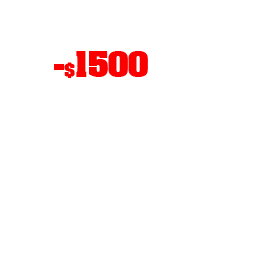
<style>
.page{position:relative;width:256px;height:256px;background:#ffffff}
.page>*{position:absolute;margin:0}
.t1{font:30px "AardvarkBold";color:#fa0000}
.t2{font:16px "AardvarkBold";color:#fa0000}
</style>
<div class="page">
<p class="t1" style="left:54px;top:51px;width:94px;height:27px">-<span class="t2">$</span>1500</p>
</div>
